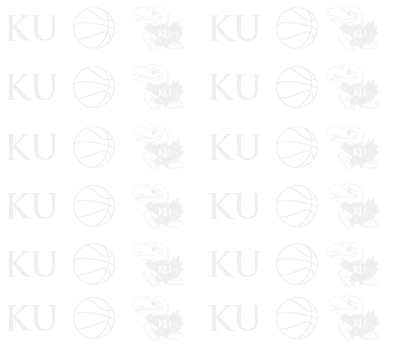
<style>
.page{position:relative;width:400px;height:347px;background:#ffffff}
.page>*{position:absolute;margin:0}
.t1{font:34px "TrajanPro-Bold";color:#eeeff0}
</style>
<div class="page">
<p class="t1" style="left:5px;top:15px;width:53px;height:26px">KU</p>
<p class="t1" style="left:208px;top:15px;width:53px;height:26px">KU</p>
<p class="t1" style="left:5px;top:74px;width:53px;height:26px">KU</p>
<p class="t1" style="left:208px;top:74px;width:53px;height:26px">KU</p>
<p class="t1" style="left:5px;top:134px;width:53px;height:26px">KU</p>
<p class="t1" style="left:208px;top:134px;width:53px;height:26px">KU</p>
<p class="t1" style="left:5px;top:193px;width:53px;height:26px">KU</p>
<p class="t1" style="left:208px;top:193px;width:53px;height:26px">KU</p>
<p class="t1" style="left:5px;top:251px;width:53px;height:26px">KU</p>
<p class="t1" style="left:208px;top:251px;width:53px;height:26px">KU</p>
<p class="t1" style="left:5px;top:305px;width:53px;height:26px">KU</p>
<p class="t1" style="left:208px;top:305px;width:53px;height:26px">KU</p>
</div>
